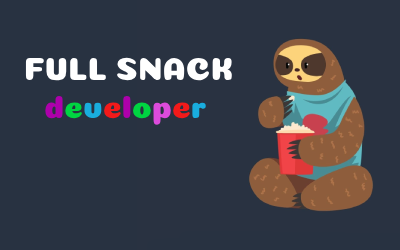
<style>
.page{position:relative;width:400px;height:250px;background:#293241}
.page>*{position:absolute;margin:0}
.t1{font:32px "Coiny-Regular";color:#ffffff}
.t2{font:32px "Coiny-Regular";color:#ad00ab}
.t3{font:32px "Coiny-Regular";color:#00d541}
.t4{font:32px "Coiny-Regular";color:#19adde}
.t5{font:32px "Coiny-Regular";color:#f31a1a}
.t6{font:32px "Coiny-Regular";color:#dc4bdb}
</style>
<div class="page">
<p class="t1" style="left:25px;top:57px;width:207px;height:24px">FULL SNACK</p>
<p class="t2" style="left:45px;top:96px;width:161px;height:29px">d<span class="t3">e</span><span class="t4">v</span><span class="t5">e</span>l<span class="t3">o</span><span class="t6">p</span><span class="t5">e</span><span class="t4">r</span></p>
</div>
